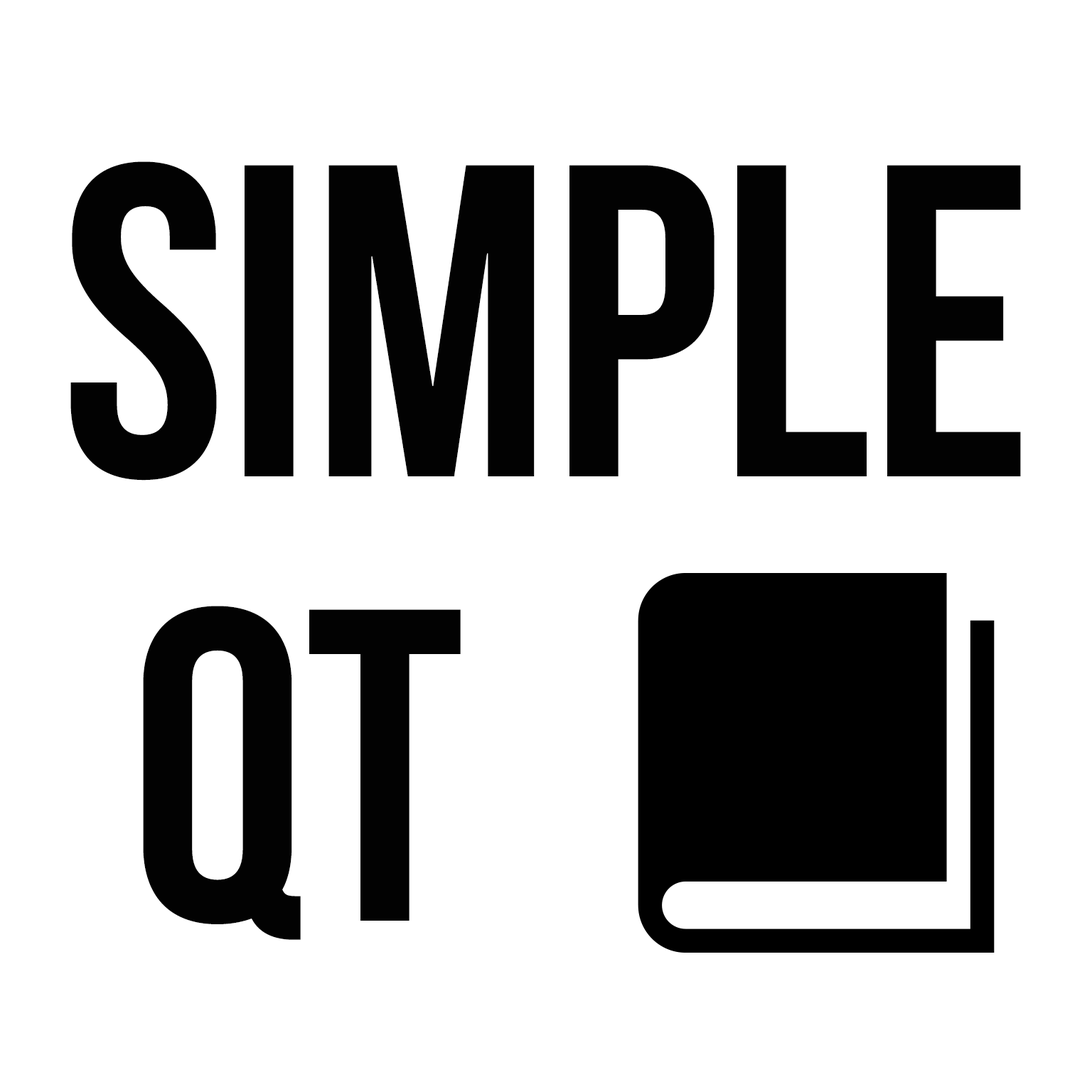
<style>
.page{position:relative;width:1092px;height:1092px;background:#ffffff}
.page>*{position:absolute;margin:0}
.t1{font:444.3px/444.3px "BebasNeue";color:#020202}
</style>
<div class="page">
<p class="t1" style="left:70px;top:161px;width:951px;height:779px">SIMPLE<br> QT</p>
</div>
